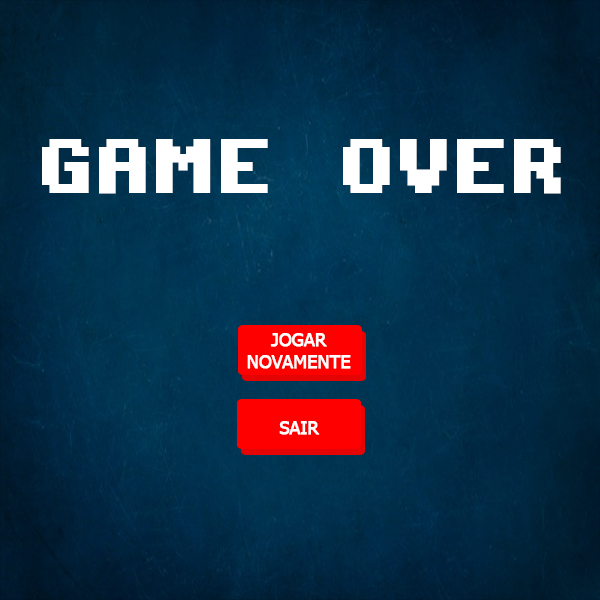
<style>
.page{position:relative;width:600px;height:600px}
.page>*{position:absolute;margin:0}
.t1{font:60px "AmigaForeverPro2";letter-spacing:0.05em;color:#ffffff;font-weight:bold}
.t2{font:18.5px "Tahoma";color:#ffffff;font-weight:bold;scale:0.95 1}
</style>
<div class="page">
<p class="t1" style="left:42px;top:139px;width:519px;height:55px">GAME OVER</p>
<p class="t2" style="left:247px;top:333px;width:104px;height:36px;text-align:center">JOGAR <br>NOVAMENTE</p>
<p class="t2" style="left:279px;top:421px;width:41px;height:14px">SAIR</p>
</div>
